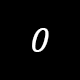
<style>
.page{position:relative;width:80px;height:80px;background:#000000}
.page>*{position:absolute;margin:0}
.t1{font:36px "Cambria-Italic";color:#ffffff}
</style>
<div class="page">
<p class="t1" style="left:32px;top:28px;width:17px;height:24px">0</p>
</div>
